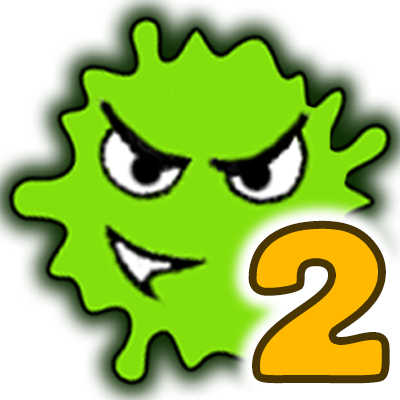
<style>
.page{position:relative;width:400px;height:400px;background:#84e00d}
.page>*{position:absolute;margin:0}
.t1{font:216.7px "Rocco-Regular";letter-spacing:-0.005em;color:#ffba00;scale:1.32 1}
</style>
<div class="page">
<p class="t1" style="left:248px;top:220px;width:142px;height:164px">2</p>
</div>
